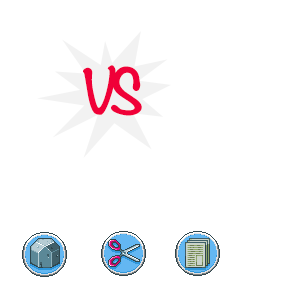
<style>
.page{position:relative;width:300px;height:300px;background:#ffffff}
.page>*{position:absolute;margin:0}
.t1{font:55px "Noteworthy-Bold";letter-spacing:-0.18em;color:#f00038}
</style>
<div class="page">
<p class="t1" style="left:83px;top:65px;width:59px;height:51px">VS</p>
</div>
